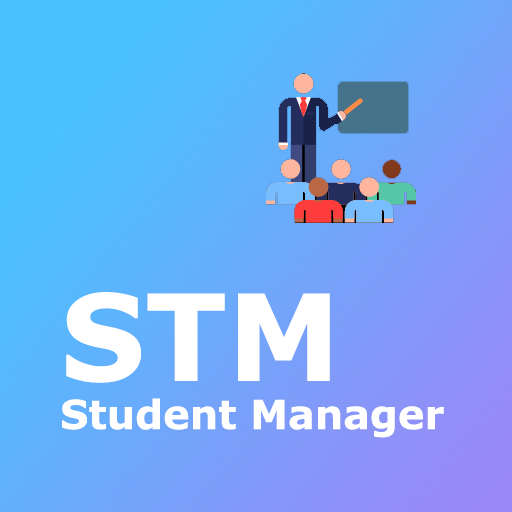
<style>
.page{position:relative;width:512px;height:512px}
.page>*{position:absolute;margin:0}
.t1{font:40px "Verdana-Bold";color:#ffffff}
.t2{font:120px "Verdana-Bold";color:#ffffff}
</style>
<div class="page">
<p class="t1" style="left:62px;top:292px;width:382px;height:146px"><span class="t2">STM<br></span>Student Manager</p>
</div>
